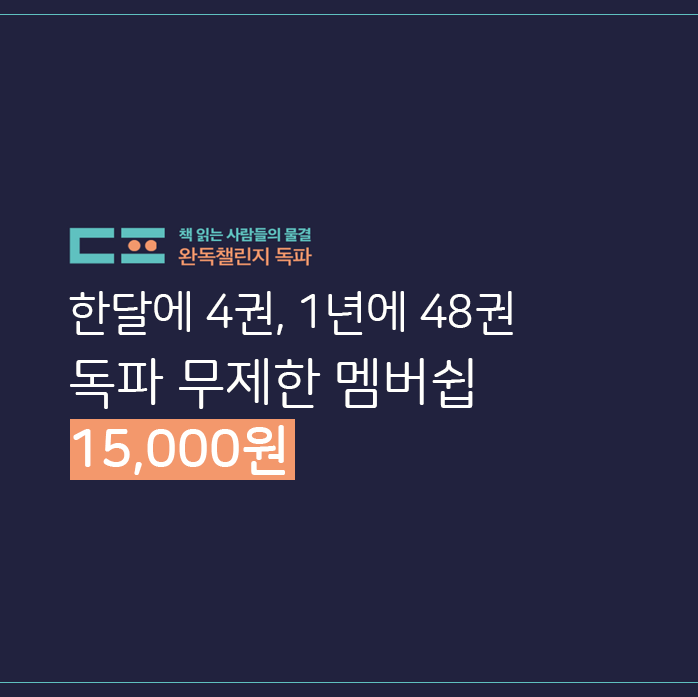
<style>
.page{position:relative;width:698px;height:697px;background:#21223e}
.page>*{position:absolute;margin:0}
.t1{font:46.7px/66.7px "NanumSquareRoundR";letter-spacing:-0.01em;color:#fffffd}
.t2{font:53.3px/66.7px "NanumSquareRoundR";letter-spacing:-0.01em;color:#fffffd}
.t3{font:53.3px/66.7px "NanumSquareRoundB";letter-spacing:-0.01em;color:#fffffd}
</style>
<div class="page">
<p class="t1" style="left:69px;top:291px;width:444px;height:184px">한달에 4권, 1년에 48권<br><span class="t2">독파 무제한 멤버쉽<br></span><span class="t3">15,000원</span></p>
</div>
